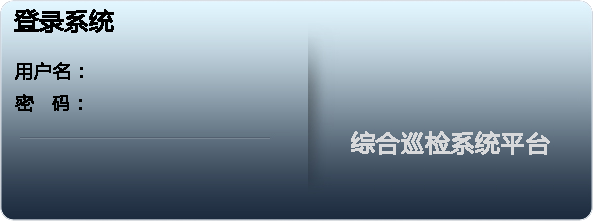
<style>
.page{position:relative;width:593px;height:221px}
.page>*{position:absolute;margin:0}
.t1{font:24px "MicrosoftYaHei";color:#000000;font-weight:bold}
.t2{font:18px "MicrosoftYaHei";color:#000000;font-weight:bold}
.t3{font:24px "MicrosoftYaHei";color:#d8d9db;font-weight:bold}
</style>
<div class="page">
<p class="t1" style="left:14px;top:9px;width:100px;height:24px">登录系统</p>
<p class="t2" style="left:15px;top:62px;width:68px;height:18px">用户名：</p>
<p class="t2" style="left:15px;top:94px;width:67px;height:18px">密   码：</p>
<p class="t3" style="left:351px;top:131px;width:199px;height:24px">综合巡检系统平台</p>
</div>
